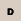
<style>
.page{position:relative;width:21px;height:21px;background:#d9cdc1}
.page>*{position:absolute;margin:0}
.t1{font:9px "Tahoma-Bold";color:#000000}
</style>
<div class="page">
<p class="t1" style="left:7px;top:8px;width:7px;height:7px">D</p>
</div>
